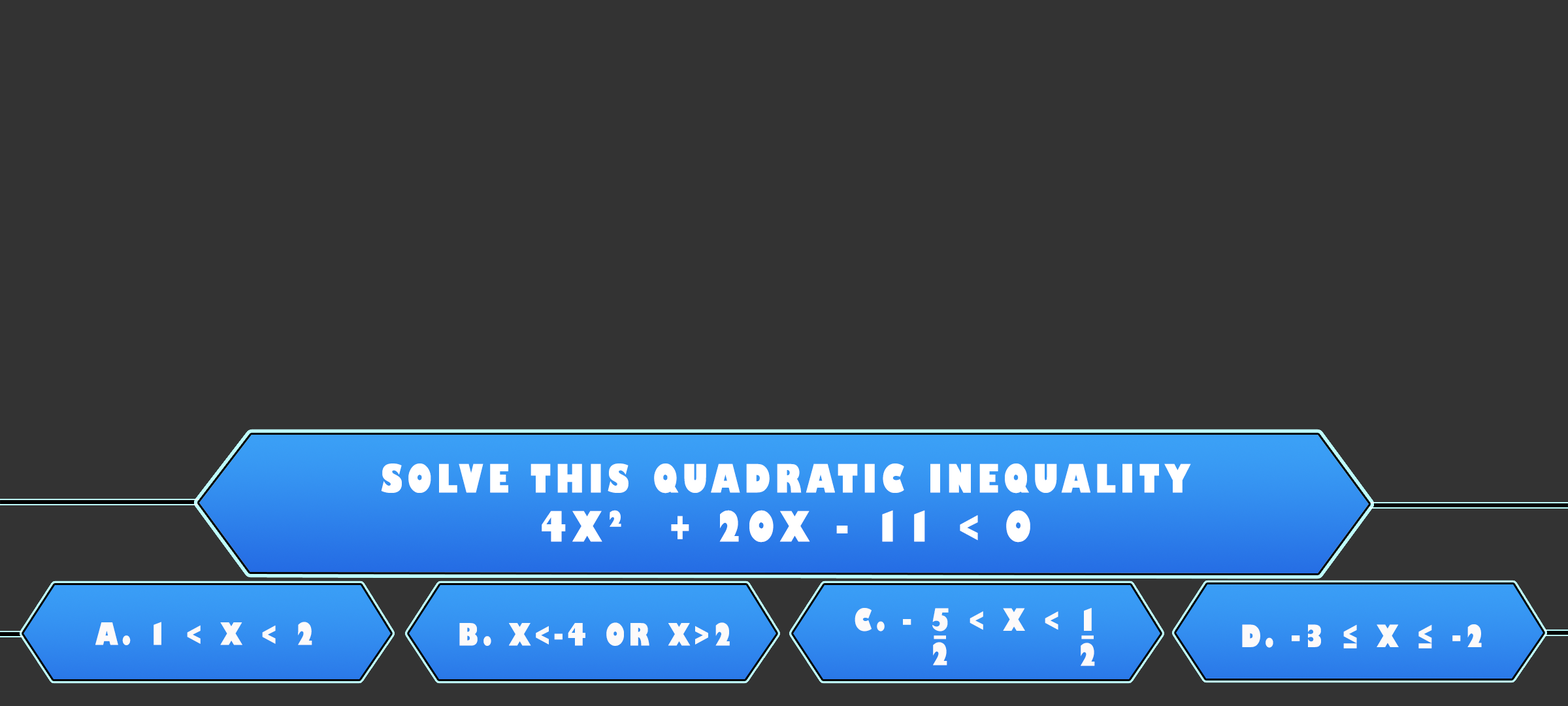
<style>
.page{position:relative;width:1568px;height:706px;background:#333333}
.page>*{position:absolute;margin:0}
.t1{font:38.1px/49px "GillSans-UltraBoldCondensed";letter-spacing:0.115em;color:#ffffff;text-transform:uppercase;scale:1.12 1}
.t2{font:40.8px/49px "GillSans-UltraBoldCondensed";letter-spacing:0.115em;color:#ffffff;text-transform:uppercase;scale:1.12 1}
.t3{font:29.9px "GillSans-UltraBoldCondensed";letter-spacing:0.115em;color:#fdfafa;text-transform:uppercase;scale:1.12 1}
.t4{font:29.9px "GillSans-UltraBoldCondensed";letter-spacing:0.115em;color:#fcfafa;text-transform:uppercase;scale:1.12 1}
</style>
<div class="page">
<p class="t1" style="left:381px;top:463px;width:810px;height:79px;text-align:center">solve this quadratic inequality<br><span class="t2">4x²  + 20x - 11 &lt; 0</span></p>
<p class="t3" style="left:855px;top:608px;width:237px;height:23px">c. - 5 &lt; x &lt; 1</p>
<p class="t3" style="left:95px;top:621px;width:217px;height:24px">a. 1 &lt; x &lt; 2</p>
<p class="t4" style="left:459px;top:622px;width:271px;height:23px">b. x&lt;-4 or x&gt;2</p>
<p class="t4" style="left:1242px;top:624px;width:240px;height:24px">d. -3 ≤ x ≤ -2</p>
<p class="t3" style="left:933px;top:642px;width:14px;height:23px">2</p>
<p class="t3" style="left:934px;top:635px;width:12px;height:4px">_</p>
<p class="t3" style="left:1081px;top:635px;width:13px;height:4px">_</p>
<p class="t3" style="left:1081px;top:642px;width:14px;height:24px">2</p>
</div>
